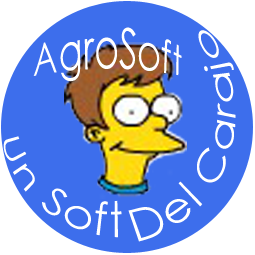
<style>
.page{position:relative;width:255px;height:255px;background:#3d6eec}
.page>*{position:absolute;margin:0}
.t1{font:36px "CenturyGothic";color:#ffffff}
.t2{font:37.5px "CenturyGothic";color:#ffffff;scale:0.92 1}
</style>
<div class="page">
<p class="t1" style="left:33px;top:27px;width:149px;height:55px">AgroSoft</p>
<p class="t2" style="left:128px;top:30px;width:108px;height:212px;rotate:-71deg">Del Carajo</p>
<p class="t1" style="left:3px;top:136px;width:119px;height:102px;rotate:37deg">Un Soft</p>
</div>
